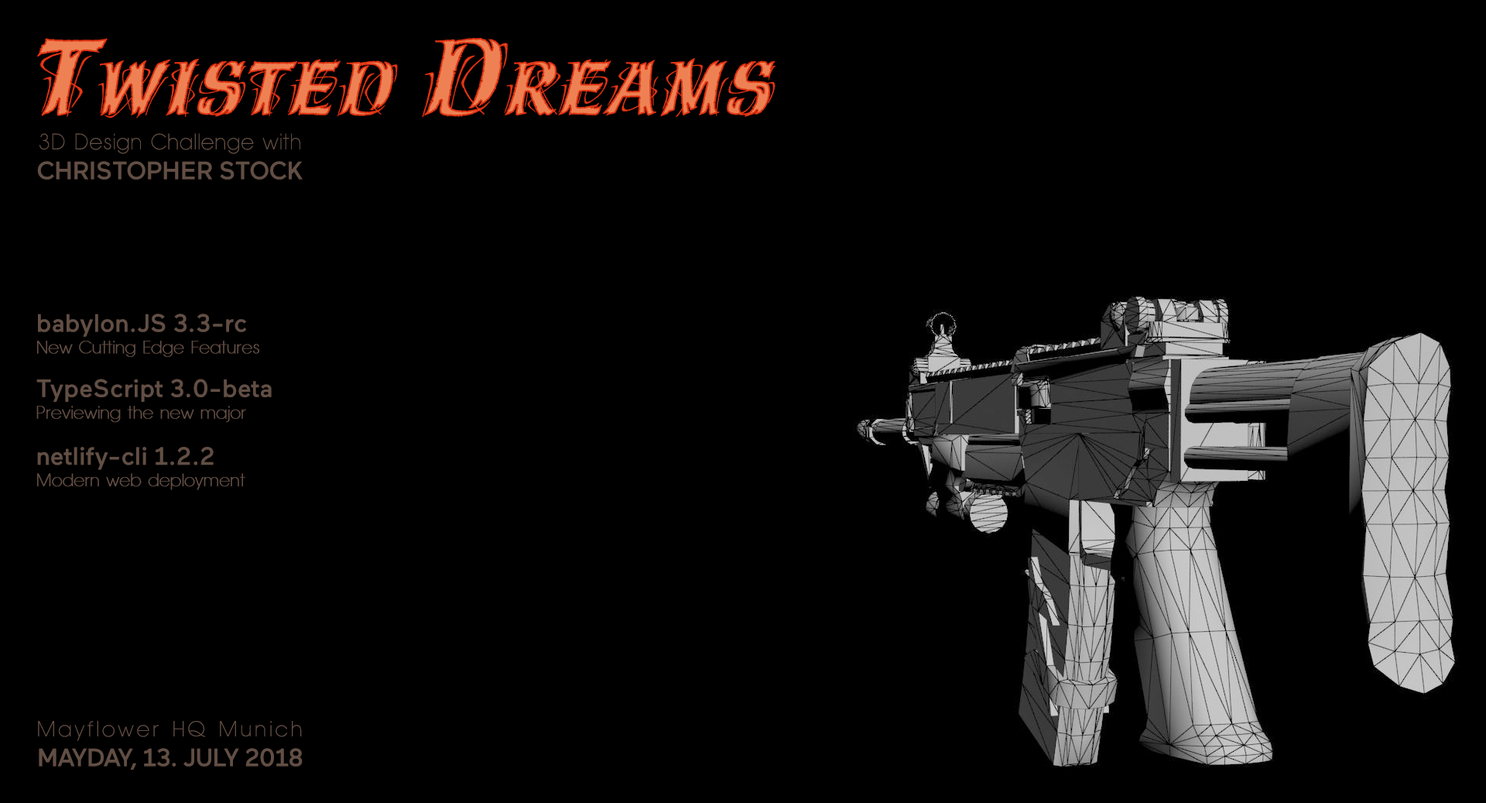
<style>
.page{position:relative;width:1486px;height:803px;background:#000000}
.page>*{position:absolute;margin:0}
.t1{font:118.1px "HazelLetPlain";color:#ee8153;font-variant:small-caps}
.t2{font:21.6px/29.9px "AvantageSmallNormal";letter-spacing:0.022em;color:#614e44;font-weight:bold}
.t3{font:25.2px/29.9px "Maax-Medium";letter-spacing:-0.007em;color:#614e44}
.t4{font:17.7px/21.3px "AvantageSmallNormal";color:#614e44;font-weight:bold}
.t5{font:25.2px/43.9px "Maax-Medium";color:#614e44}
.t6{font:25.2px/46.3px "Maax-Medium";color:#614e44}
.t7{font:25.2px/29.9px "Maax-Medium";letter-spacing:-0.025em;color:#614e44}
.t8{font:21.6px/29.9px "AvantageSmallNormal";letter-spacing:0.125em;color:#614e44;font-weight:bold}
</style>
<div class="page">
<p class="t1" style="left:37px;top:38px;width:739px;height:80px">Twisted Dreams</p>
<p class="t2" style="left:37px;top:133px;width:266px;height:47px">3D Design Challenge with<br><span class="t3">CHRISTOPHER STOCK</span></p>
<p class="t4" style="left:36px;top:313px;width:236px;height:177px"><span class="t5">babylon.JS 3.3-rc<br></span>New Cutting Edge Features<br><span class="t5">TypeScript 3.0-beta<br></span>Previewing the new major<br><span class="t6">netlify-cli 1.2.2<br></span>Modern web deployment</p>
<p class="t7" style="left:38px;top:720px;width:265px;height:49px"><span class="t8">Mayflower HQ Munich<br></span>MAYDAY, 13. JULY 2018</p>
</div>
